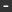
<style>
.page{position:relative;width:12px;height:12px;background:#333333}
.page>*{position:absolute;margin:0}
.t1{font:18.8px "MyriadPro-Regular";color:#fefefe}
</style>
<div class="page">
<p class="t1" style="left:3px;top:5px;width:6px;height:2px">-</p>
</div>
